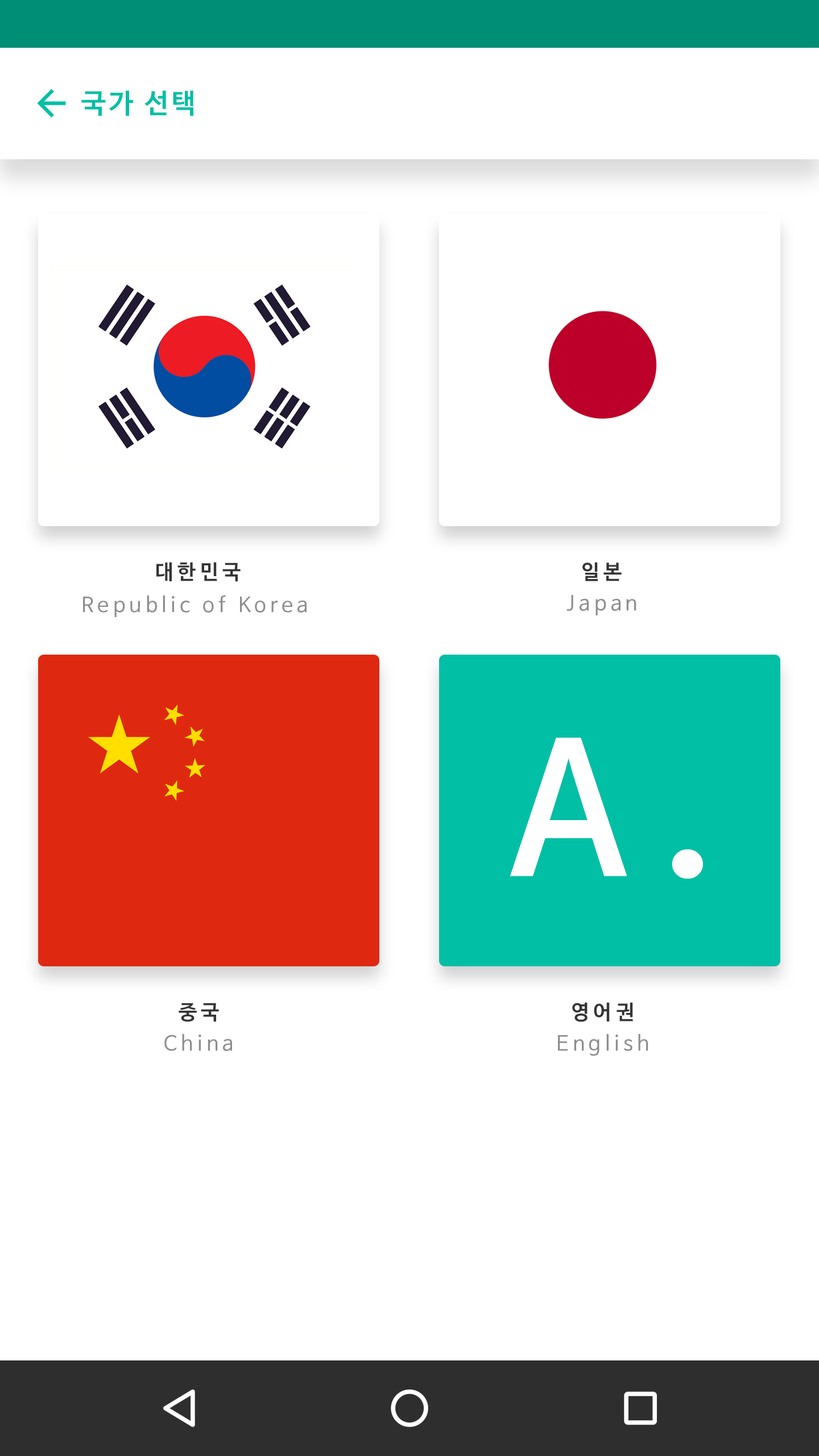
<style>
.page{position:relative;width:819px;height:1456px;background:#ffffff}
.page>*{position:absolute;margin:0}
.t1{font:27.3px "NanumBarunGothicBold";letter-spacing:0.1em;color:#00bfa5}
.t2{font:20.5px "NanumBarunGothicBold";letter-spacing:0.2em;color:#343434}
.t3{font:20.5px "NanumBarunGothic";letter-spacing:0.2em;color:#8d8d8d}
.t4{font:178.9px "NanumBarunGothicBold";letter-spacing:0.2em;color:#ffffff}
</style>
<div class="page">
<p class="t1" style="left:81px;top:90px;width:112px;height:26px">국가 선택</p>
<p class="t2" style="left:156px;top:562px;width:85px;height:20px">대한민국</p>
<p class="t2" style="left:582px;top:562px;width:40px;height:19px">일본</p>
<p class="t3" style="left:83px;top:595px;width:224px;height:22px">Republic of Korea</p>
<p class="t3" style="left:566px;top:595px;width:70px;height:20px">Japan</p>
<p class="t4" style="left:510px;top:738px;width:193px;height:141px">A.</p>
<p class="t2" style="left:179px;top:1003px;width:40px;height:19px">중국</p>
<p class="t2" style="left:572px;top:1002px;width:61px;height:20px">영어권</p>
<p class="t3" style="left:164px;top:1034px;width:68px;height:17px">China</p>
<p class="t3" style="left:558px;top:1034px;width:90px;height:22px">English</p>
</div>
